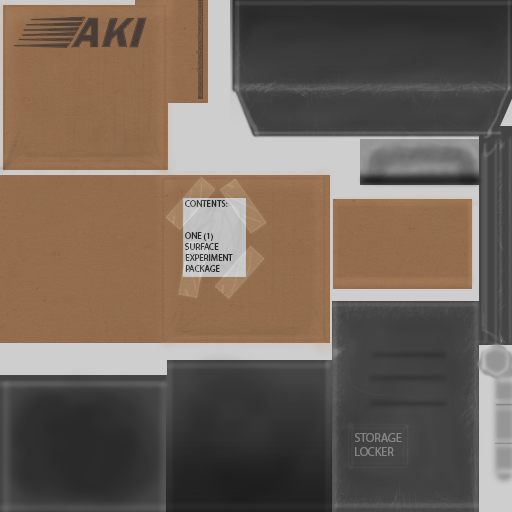
<style>
.page{position:relative;width:512px;height:512px}
.page>*{position:absolute;margin:0}
.t1{font:9px "MyriadPro-Regular";color:#292929}
.t2{font:12px "MyriadPro-Regular";color:#858585}
</style>
<div class="page">
<p class="t1" style="left:185px;top:200px;width:48px;height:72px">CONTENTS:<br><br><br>ONE (1)<br>SURFACE<br>EXPERIMENT<br>PACKAGE</p>
<p class="t2" style="left:354px;top:433px;width:48px;height:23px">STORAGE<br>LOCKER</p>
</div>
